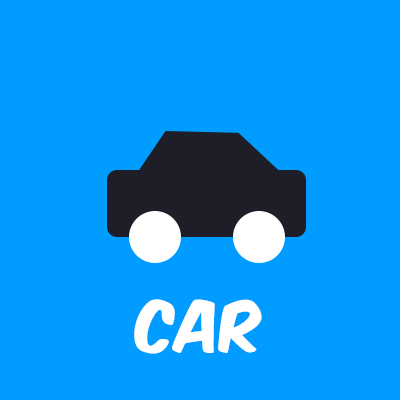
<style>
.page{position:relative;width:400px;height:400px;background:#009cff}
.page>*{position:absolute;margin:0}
.t1{font:60px "KomikaAxis";color:#ffffff}
</style>
<div class="page">
<p class="t1" style="left:134px;top:299px;width:128px;height:55px">Car</p>
</div>
